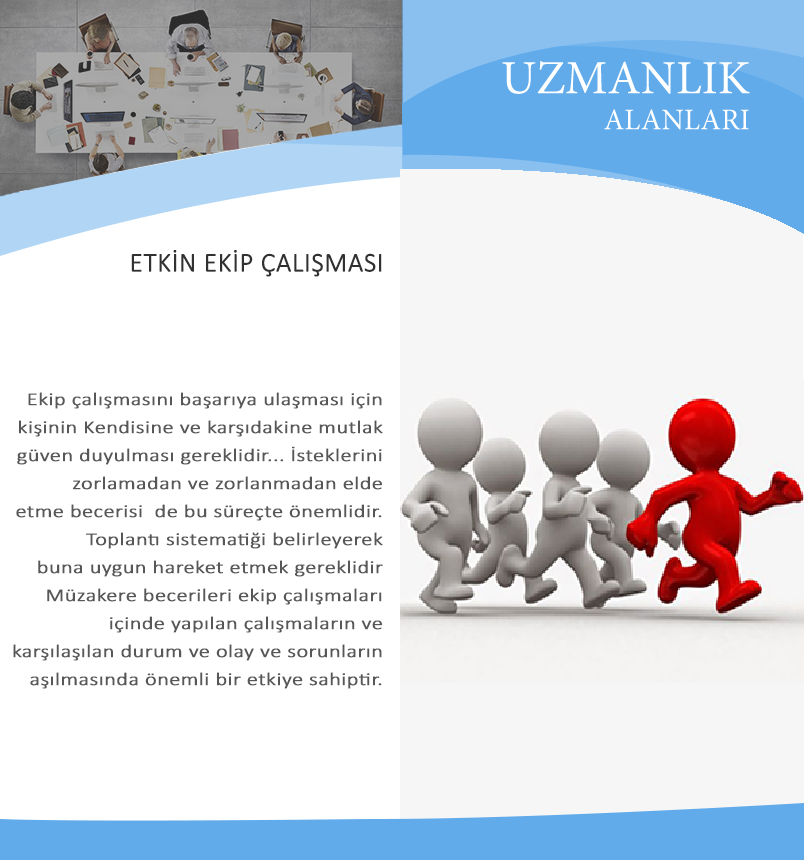
<style>
.page{position:relative;width:804px;height:860px;background:#ffffff}
.page>*{position:absolute;margin:0}
.t1{font:47.6px "MinionPro-Regular";color:#ffffff}
.t2{font:30px "MinionPro-Regular";color:#ffffff}
.t3{font:27px "Calibri-Light";color:#313131;font-weight:bold}
.t4{font:18.1px/28px "Calibri-Light";color:#575757;font-weight:bold;scale:1.22 1}
</style>
<div class="page">
<p class="t1" style="left:502px;top:61px;width:248px;height:69px;text-align:right">UZMANLIK<br><span class="t2"> ALANLARI</span></p>
<p class="t3" style="left:131px;top:250px;width:251px;height:27px">ETKİN EKİP ÇALIŞMASI</p>
<p class="t4" style="left:13px;top:392px;width:370px;height:297px;text-align:right">Ekip çalışmasını başarıya ulaşması için<br>kişinin Kendisine ve karşıdakine mutlak<br>güven duyulması gereklidir... İsteklerini<br>zorlamadan ve zorlanmadan elde<br>etme becerisi  de bu süreçte önemlidir.<br> Toplantı sistematiği belirleyerek<br>buna uygun hareket etmek gereklidir<br>Müzakere becerileri ekip çalışmaları<br>içinde yapılan çalışmaların ve<br>karşılaşılan durum ve olay ve sorunların<br>aşılmasında önemli bir etkiye sahiptir.</p>
</div>
